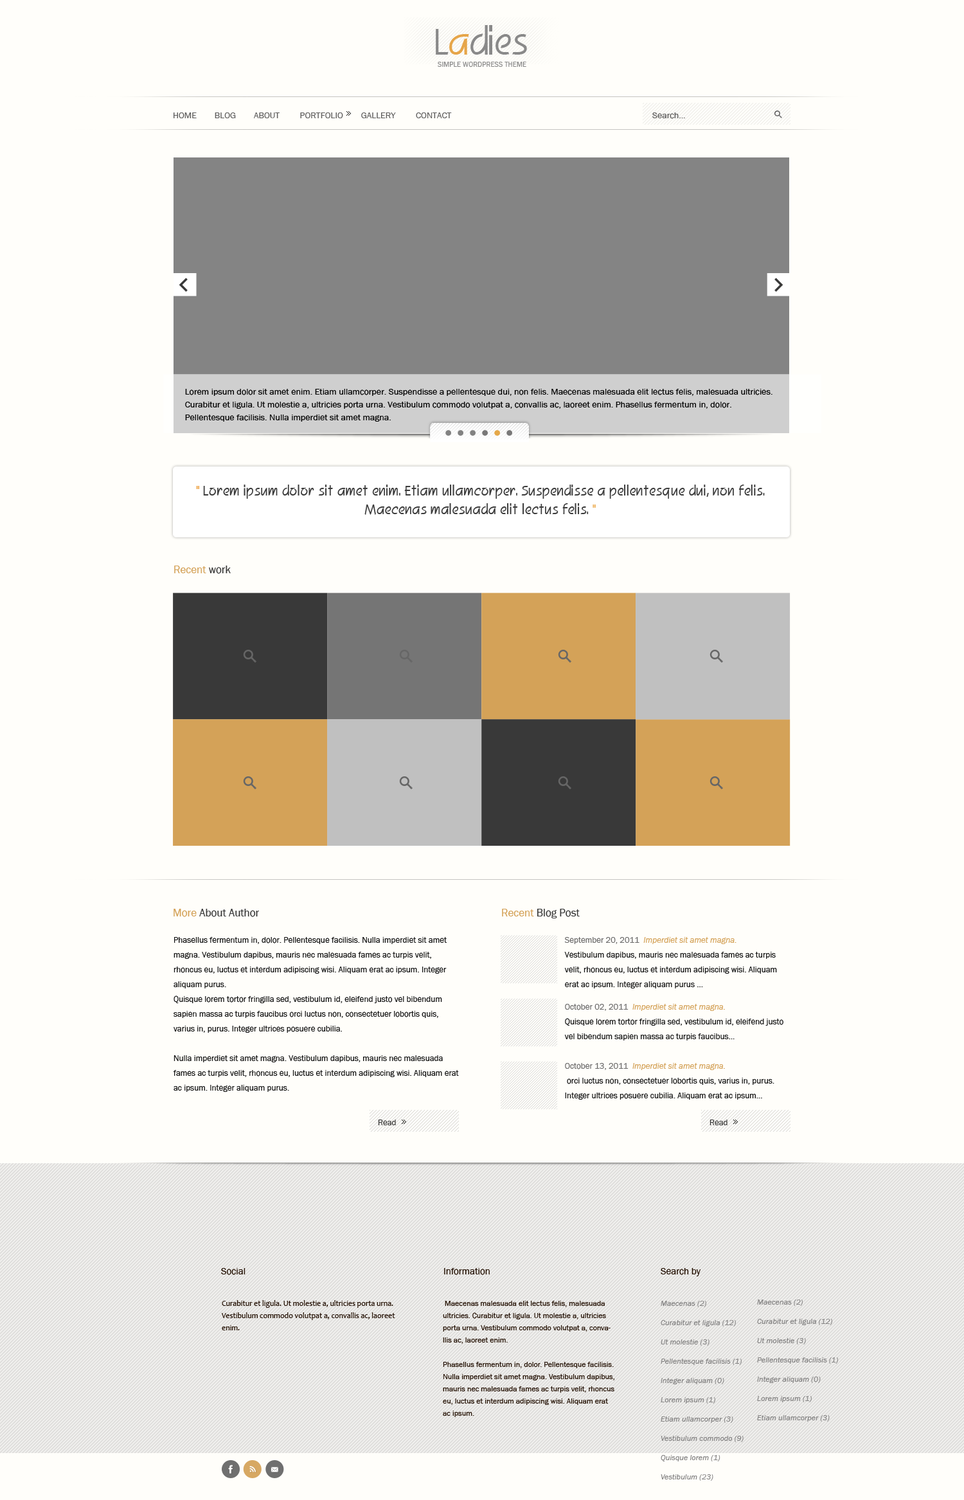
<style>
.page{position:relative;width:964px;height:1500px;background:#fffefa}
.page>*{position:absolute;margin:0}
.t1{font:36px "RevereNormal";color:#898989}
.t2{font:36px "RevereNormal";color:#e6a549}
.t3{font:7.1px "FranklinGothic-Book";letter-spacing:0.01em;color:#898989;text-transform:uppercase}
.t4{font:9px "FranklinGothic-Book";color:#5f5e5e;text-transform:uppercase}
.t5{font:9px "FranklinGothic-Book";color:#5f5e5e}
.t6{font:9px/12.9px "FranklinGothic-Book";color:#050505}
.t7{font:13.5px/18.6px "RevereNormal";letter-spacing:0.025em;color:#3b3b3b}
.t8{font:13.5px/18.6px "RevereNormal";letter-spacing:0.025em;color:#eea74d}
.t9{font:13.5px/18.6px "RevereNormal";letter-spacing:0.025em;color:#edb059}
.t10{font:10.9px "FranklinGothic-Book";color:#d4a258}
.t11{font:10.9px "FranklinGothic-Book";color:#393939}
.t12{font:8.4px/14.8px "FranklinGothic-Book";color:#141414}
.t13{font:8.4px/14.8px "FranklinGothic-Book";color:#6b6a6a}
.t14{font:8.4px/14.8px "FranklinGothic-BookItalic";color:#d4a258}
.t15{font:8.4px "FranklinGothic-Book";color:#393939}
.t16{font:9.6px "FranklinGothic-Book";color:#241103}
.t17{font:7.7px/12.2px "Candara";color:#241103}
.t18{font:7.7px/12.2px "FranklinGothic-Book";color:#241103}
.t19{font:7.7px/19.3px "FranklinGothic-BookItalic";letter-spacing:0.01em;color:#858484}
.t20{font:7.7px/11.6px "FranklinGothic-BookItalic";letter-spacing:0.01em;color:#858484}
</style>
<div class="page">
<p class="t1" style="left:436px;top:25px;width:91px;height:30px">L<span class="t2">a</span>dies</p>
<p class="t3" style="left:438px;top:62px;width:88px;height:6px">simple wordpress theme</p>
<p class="t4" style="left:174px;top:113px;width:278px;height:5px">home        blog        about         portfolio        gallery         contact</p>
<p class="t5" style="left:652px;top:113px;width:33px;height:6px">Search...</p>
<p class="t6" style="left:185px;top:389px;width:588px;height:33px">Lorem ipsum dolor sit amet enim. Etiam ullamcorper. Suspendisse a pellentesque dui, non felis. Maecenas malesuada elit lectus felis, malesuada ultricies. Curabitur et ligula. Ut molestie a, ultricies porta urna. Vestibulum commodo volutpat a, convallis ac, laoreet enim. Phasellus fermentum in, dolor. Pellentesque facilisis. Nulla imperdiet sit amet magna.</p>
<p class="t7" style="left:196px;top:485px;width:569px;height:30px;text-align:center"><span class="t8">"</span> Lorem ipsum dolor sit amet enim. Etiam ullamcorper. Suspendisse a pellentesque dui, non felis. Maecenas malesuada elit lectus felis. <span class="t9">"</span></p>
<p class="t10" style="left:174px;top:566px;width:57px;height:8px">Recent<span class="t11"> work</span></p>
<p class="t11" style="left:174px;top:909px;width:85px;height:8px"><span class="t10">More</span> About Author</p>
<p class="t11" style="left:502px;top:909px;width:78px;height:10px"><span class="t10">Recent</span> Blog Post</p>
<p class="t12" style="left:173px;top:937px;width:286px;height:155px">Phasellus fermentum in, dolor. Pellentesque facilisis. Nulla imperdiet sit amet magna. Vestibulum dapibus, mauris nec malesuada fames ac turpis velit, rhoncus eu, luctus et interdum adipiscing wisi. Aliquam erat ac ipsum. Integer aliquam purus. <br>Quisque lorem tortor fringilla sed, vestibulum id, eleifend justo vel bibendum sapien massa ac turpis faucibus orci luctus non, consectetuer lobortis quis, varius in, purus. Integer ultrices posuere cubilia. <br><br>Nulla imperdiet sit amet magna. Vestibulum dapibus, mauris nec malesuada fames ac turpis velit, rhoncus eu, luctus et interdum adipiscing wisi. Aliquam erat ac ipsum. Integer aliquam purus.</p>
<p class="t12" style="left:564px;top:937px;width:220px;height:163px"><span class="t13">September 20, 2011  </span><span class="t14">Imperdiet sit amet magna. <br></span>Vestibulum dapibus, mauris nec malesuada fames ac turpis velit, rhoncus eu, luctus et interdum adipiscing wisi. Aliquam erat ac ipsum. Integer aliquam purus ...<br><br><span class="t13">October 02, 2011  </span><span class="t14">Imperdiet sit amet magna. <br></span>Quisque lorem tortor fringilla sed, vestibulum id, eleifend justo vel bibendum sapien massa ac turpis faucibus...<br><br><span class="t13">October 13, 2011  </span><span class="t14">Imperdiet sit amet magna. <br></span> orci luctus non, consectetuer lobortis quis, varius in, purus. Integer ultrices posuere cubilia. Aliquam erat ac ipsum...</p>
<p class="t15" style="left:378px;top:1120px;width:18px;height:6px">Read</p>
<p class="t15" style="left:710px;top:1120px;width:18px;height:6px">Read</p>
<p class="t16" style="left:221px;top:1268px;width:25px;height:7px">Social</p>
<p class="t16" style="left:444px;top:1268px;width:46px;height:7px">Information</p>
<p class="t16" style="left:661px;top:1268px;width:40px;height:9px">Search by</p>
<p class="t17" style="left:222px;top:1300px;width:173px;height:31px">Curabitur et ligula. Ut molestie a, ultricies porta urna. Vestibulum commodo volutpat a, convallis ac, laoreet enim.</p>
<p class="t18" style="left:443px;top:1301px;width:172px;height:117px">Maecenas malesuada elit lectus felis, malesuada ultricies. Curabitur et ligula. Ut molestie a, ultricies porta urna. Vestibulum commodo volutpat a, convallis ac, laoreet enim. <br><br>Phasellus fermentum in, dolor. Pellentesque facilisis. Nulla imperdiet sit amet magna. Vestibulum dapibus, mauris nec malesuada fames ac turpis velit, rhoncus eu, luctus et interdum adipiscing wisi. Aliquam erat ac ipsum.</p>
<p class="t19" style="left:661px;top:1301px;width:83px;height:180px"><span class="t20">Maecenas (2)</span><br>Curabitur et ligula (12)<br>Ut molestie (3)<br>Pellentesque facilisis (1)<br>Integer aliquam (0)<br>Lorem ipsum (1)<br>Etiam ullamcorper (3)<br>Vestibulum commodo (9)<br>Quisque lorem (1)<br>Vestibulum (23)</p>
<p class="t19" style="left:757px;top:1300px;width:81px;height:122px"><span class="t20">Maecenas (2)</span><br>Curabitur et ligula (12)<br>Ut molestie (3)<br>Pellentesque facilisis (1)<br>Integer aliquam (0)<br>Lorem ipsum (1)<br>Etiam ullamcorper (3)</p>
</div>
